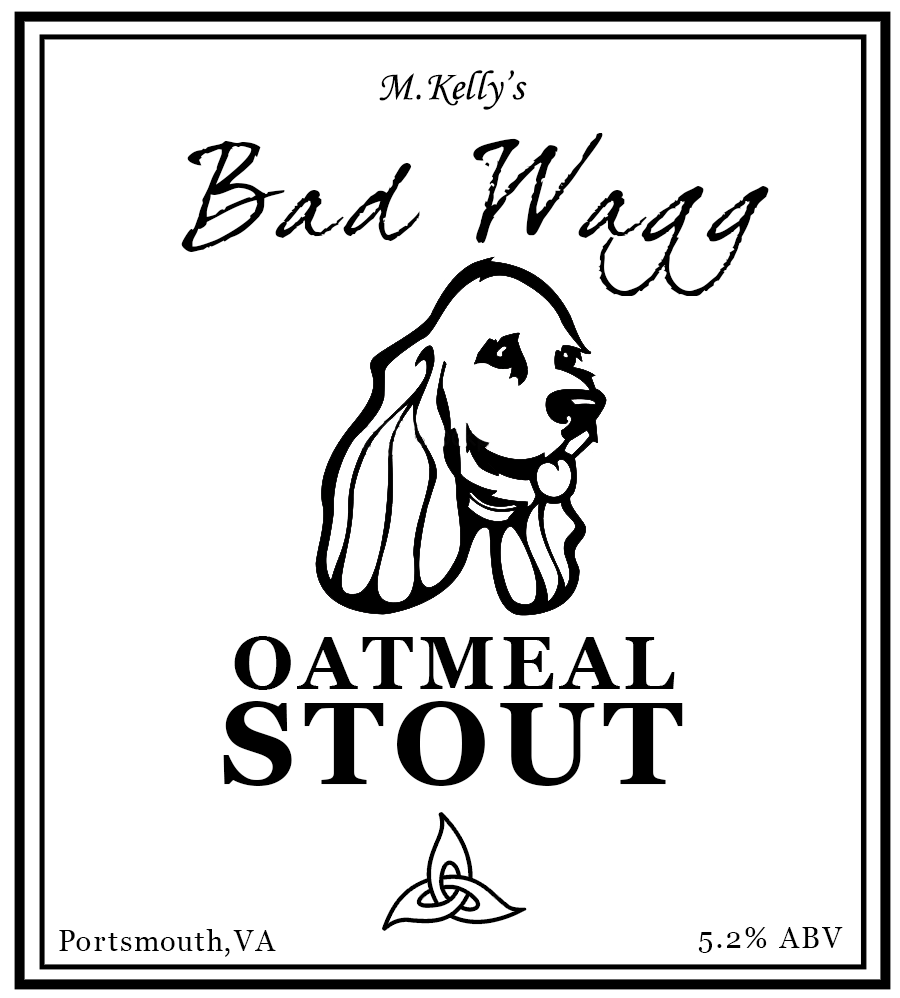
<style>
.page{position:relative;width:900px;height:998px;background:#ffffff}
.page>*{position:absolute;margin:0}
.t1{font:41.7px "MonotypeCorsiva";letter-spacing:0.035em;color:#000000}
.t2{font:41.7px "MonotypeCorsiva";letter-spacing:-0.065em;color:#000000}
.t3{font:41.7px "MonotypeCorsiva";letter-spacing:-0.025em;color:#000000}
.t4{font:41.7px "MonotypeCorsiva";letter-spacing:0.015em;color:#000000}
.t5{font:41.7px "MonotypeCorsiva";letter-spacing:-0.005em;color:#000000}
.t6{font:41.7px "MonotypeCorsiva";letter-spacing:0.075em;color:#000000}
.t7{font:116.7px "DearJoefour";letter-spacing:0.075em;color:#000000}
.t8{font:75px "Georgia-Bold";letter-spacing:0.075em;color:#000000}
.t9{font:116.7px "Georgia-Bold";letter-spacing:0.075em;color:#000000}
.t10{font:29.2px "Georgia";letter-spacing:0.075em;color:#000000}
.t11{font:29.2px "Georgia";letter-spacing:-0.002em;color:#000000}
.t12{font:29.2px "Georgia";letter-spacing:0.055em;color:#000000}
.t13{font:29.2px "Georgia";letter-spacing:-0.005em;color:#000000}
.t14{font:29.2px "Georgia";letter-spacing:0.035em;color:#000000}
.t15{font:29.2px "Georgia";letter-spacing:0.095em;color:#000000}
</style>
<div class="page">
<p class="t1" style="left:379px;top:70px;width:148px;height:40px">M. <span class="t2">K</span><span class="t3">e</span>l<span class="t4">l</span><span class="t3">y</span><span class="t5">’</span><span class="t6">s</span></p>
<p class="t7" style="left:181px;top:133px;width:588px;height:163px">Bad Wagg</p>
<p class="t8" style="left:234px;top:636px;width:441px;height:54px">OATMEAL</p>
<p class="t9" style="left:223px;top:701px;width:460px;height:85px">STOUT</p>
<p class="t10" style="left:59px;top:929px;width:217px;height:28px"><span class="t11">P</span>ort<span class="t12">s</span><span class="t13">m</span><span class="t14">ou</span>t<span class="t13">h</span><span class="t15">,</span>VA</p>
<p class="t10" style="left:698px;top:927px;width:145px;height:26px">5.2% ABV</p>
</div>
